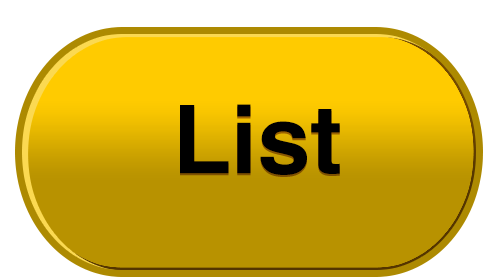
<style>
.page{position:relative;width:498px;height:280px;background:#b89200}
.page>*{position:absolute;margin:0}
.t1{font:95px "Helvetica-Bold";color:#000000}
</style>
<div class="page">
<p class="t1" style="left:180px;top:104px;width:160px;height:71px">List</p>
</div>
